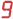
<style>
.page{position:relative;width:13px;height:19px;background:#ffffff}
.page>*{position:absolute;margin:0}
.t1{font:24px "DigitalReadoutThick";letter-spacing:0.1em;color:#ca3d3d}
</style>
<div class="page">
<p class="t1" style="left:1px;top:0px;width:12px;height:19px">9</p>
</div>
